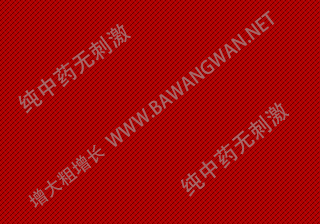
<style>
.page{position:relative;width:320px;height:224px;background:#b00000}
.page>*{position:absolute;margin:0}
.t1{font:18px "AdobeHeitiStd-Regular";color:#aa6767;text-transform:uppercase}
.t2{font:22px "AdobeHeitiStd-Regular";color:#aa6767;text-transform:uppercase}
</style>
<div class="page">
<p class="t1" style="left:28px;top:10px;width:247px;height:198px;rotate:-38deg">增大粗增长  WWW.BAWANGWAN.NET</p>
<p class="t2" style="left:18px;top:23px;width:113px;height:91px;rotate:-36deg">纯中药无刺激</p>
<p class="t2" style="left:180px;top:102px;width:110px;height:95px;rotate:-40deg">纯中药无刺激</p>
</div>
